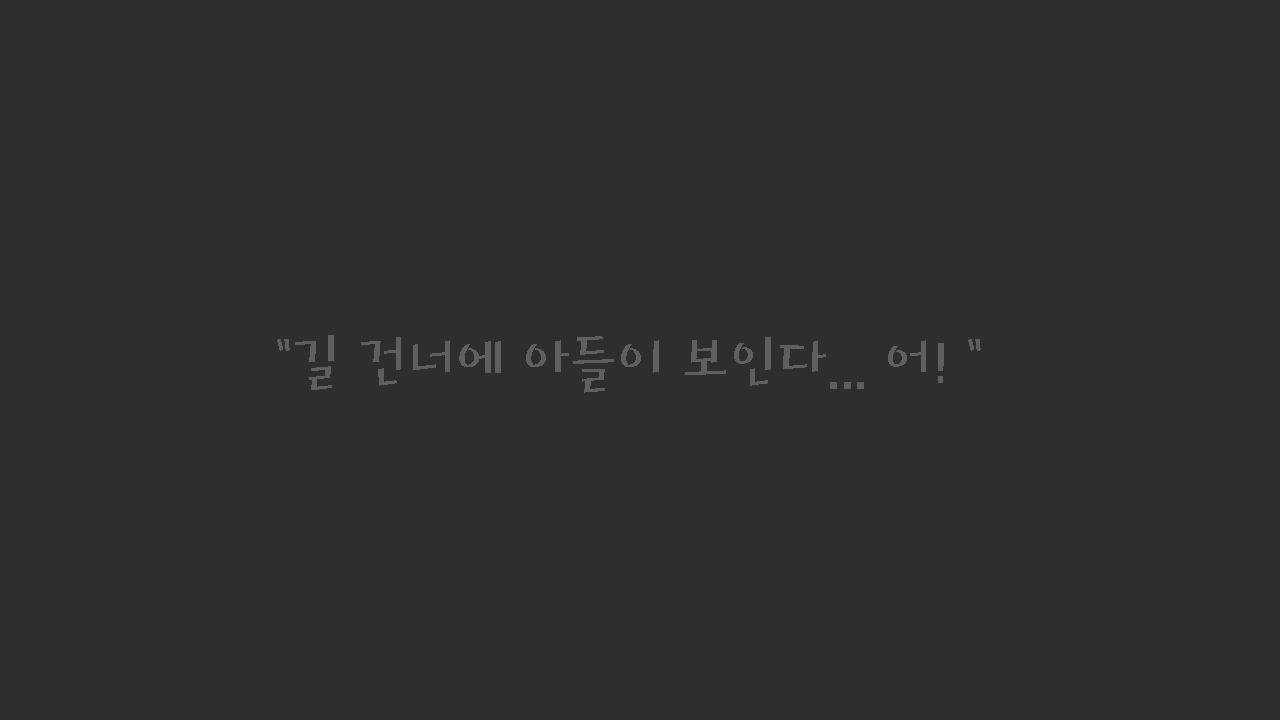
<style>
.page{position:relative;width:1280px;height:720px;background:#2e2e2e}
.page>*{position:absolute;margin:0}
.t1{font:60px "HoonMakdR";color:#5f5f5f}
</style>
<div class="page">
<p class="t1" style="left:277px;top:335px;width:704px;height:58px">"길 건너에 아들이 보인다... 어! "</p>
</div>
